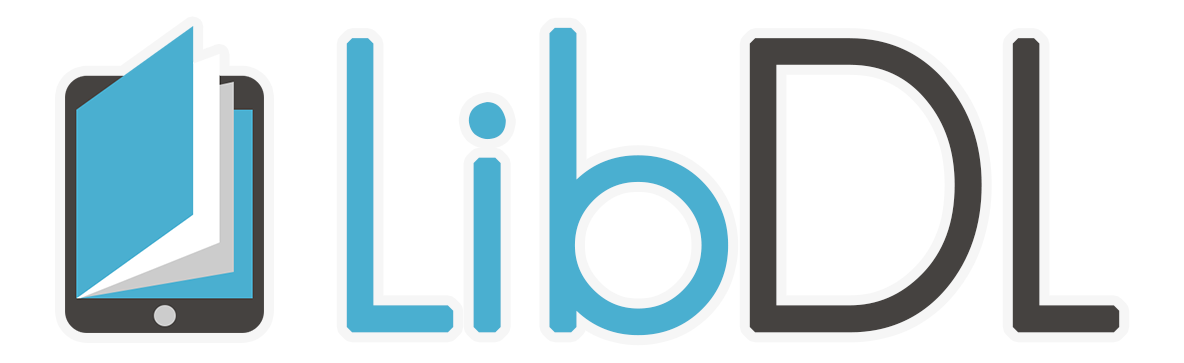
<style>
.page{position:relative;width:1184px;height:363px;background:#ffffff}
.page>*{position:absolute;margin:0}
.t1{font:397.4px "GeosansLight";color:#4aafd0;font-weight:bold}
.t2{font:397.4px "GeosansLight";color:#454240;font-weight:bold}
</style>
<div class="page">
<p class="t1" style="left:346px;top:27px;width:774px;height:309px">Lib<span class="t2">DL</span></p>
</div>
